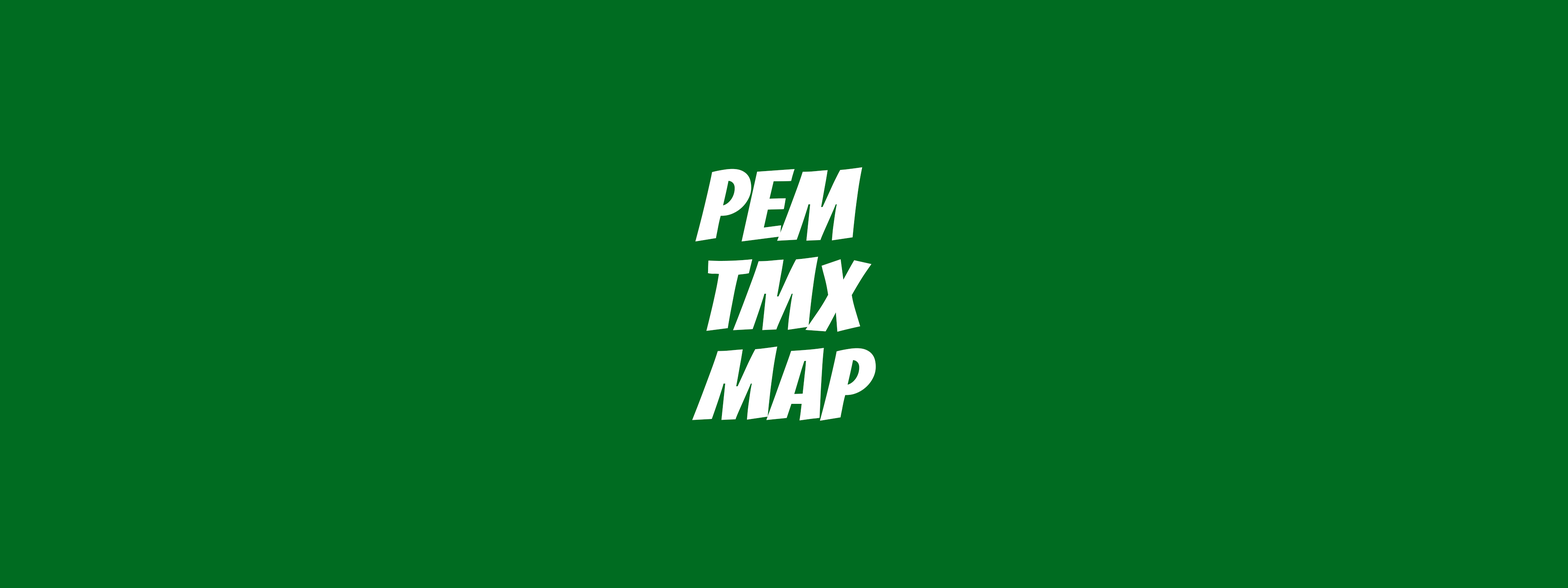
<style>
.page{position:relative;width:1568px;height:588px;background:#006c21}
.page>*{position:absolute;margin:0}
.t1{font:98px/89.4px "Bangers-Regular";color:#ffffff;scale:1.21 1}
</style>
<div class="page">
<p class="t1" style="left:692px;top:167px;width:184px;height:254px">PEM<br>TMX<br>MAP</p>
</div>
